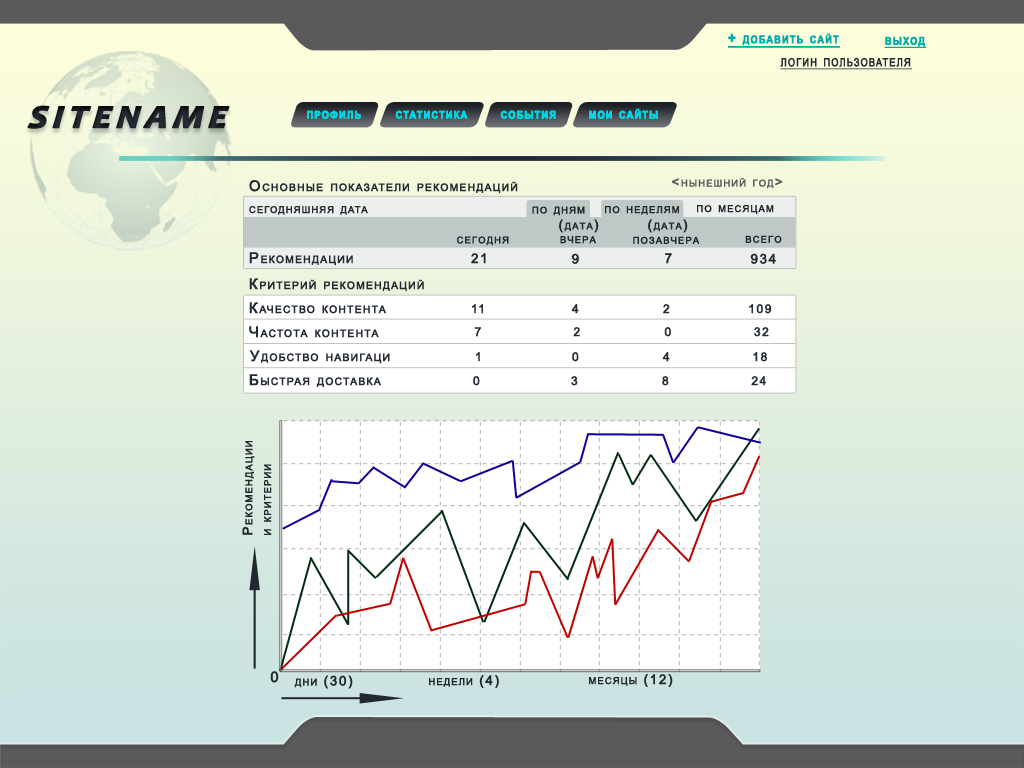
<style>
.page{position:relative;width:1024px;height:768px}
.page>*{position:absolute;margin:0}
.t1{font:15.3px "Arial-BoldMT";letter-spacing:0.1em;color:#00abab;font-variant:small-caps;font-weight:bold;text-decoration:underline;scale:0.86 1}
.t2{font:16.2px "ArialMT";letter-spacing:0.1em;color:#252b33;font-variant:small-caps;font-weight:bold;text-decoration:underline;scale:0.81 1}
.t3{font:40px "Candara-BoldItalic";letter-spacing:0.1em;color:#252b33;font-variant:small-caps;font-weight:bold;font-style:italic}
.t4{font:15.3px "Arial-BoldMT";letter-spacing:0.1em;color:#00d7e3;font-variant:small-caps;font-weight:bold;scale:0.86 1}
.t5{font:14.7px "ArialMT";letter-spacing:0.1em;color:#252b33;font-variant:small-caps;font-weight:bold}
.t6{font:13.3px "ArialMT";letter-spacing:0.1em;color:#5b595c;font-variant:small-caps;font-weight:bold}
.t7{font:13.3px "ArialMT";letter-spacing:0.1em;color:#252b33;font-variant:small-caps;font-weight:bold}
.t8{font:13.3px "ArialMT";letter-spacing:0.1em;color:#22282f;font-variant:small-caps;font-weight:bold}
.t9{font:12px "ArialMT";letter-spacing:0.1em;color:#252b33;font-variant:small-caps;font-weight:bold}
.t10{font:13.3px/18.7px "ArialMT";letter-spacing:0.1em;color:#22282f;font-variant:small-caps;font-weight:bold}
.t11{font:14.7px "ArialMT";letter-spacing:0.1em;color:#252a32;font-variant:small-caps;font-weight:bold}
</style>
<div class="page">
<p class="t1" style="left:728px;top:33px;width:112px;height:15px">+ добавить сайт</p>
<p class="t1" style="left:884px;top:36px;width:43px;height:12px">выход</p>
<p class="t2" style="left:780px;top:57px;width:132px;height:13px">логин пользователя</p>
<p class="t3" style="left:27px;top:105px;width:203px;height:24px">sitename</p>
<p class="t4" style="left:307px;top:110px;width:54px;height:9px">профиль</p>
<p class="t4" style="left:307px;top:110px;width:54px;height:9px">профиль</p>
<p class="t4" style="left:395px;top:110px;width:73px;height:9px">статистика</p>
<p class="t4" style="left:395px;top:110px;width:73px;height:9px">статистика</p>
<p class="t4" style="left:500px;top:110px;width:56px;height:9px">события</p>
<p class="t4" style="left:500px;top:110px;width:56px;height:9px">события</p>
<p class="t4" style="left:589px;top:108px;width:69px;height:11px">мои сайты</p>
<p class="t4" style="left:589px;top:108px;width:69px;height:11px">мои сайты</p>
<p class="t5" style="left:249px;top:180px;width:269px;height:14px">Основные показатели рекомендаций</p>
<p class="t6" style="left:672px;top:178px;width:110px;height:11px">&lt;нынешний год&gt;</p>
<p class="t7" style="left:249px;top:206px;width:119px;height:9px">сегодняшняя дата</p>
<p class="t8" style="left:532px;top:206px;width:53px;height:10px">по дням</p>
<p class="t8" style="left:605px;top:206px;width:74px;height:9px">по неделям</p>
<p class="t8" style="left:697px;top:205px;width:77px;height:9px">по месяцам</p>
<p class="t8" style="left:559px;top:219px;width:40px;height:14px">(дата)</p>
<p class="t8" style="left:648px;top:219px;width:40px;height:14px">(дата)</p>
<p class="t8" style="left:457px;top:236px;width:52px;height:10px">сегодня</p>
<p class="t8" style="left:560px;top:236px;width:36px;height:8px">вчера</p>
<p class="t8" style="left:633px;top:236px;width:67px;height:8px">позавчера</p>
<p class="t8" style="left:745px;top:235px;width:37px;height:8px">всего</p>
<p class="t5" style="left:249px;top:252px;width:104px;height:14px">Рекомендации</p>
<p class="t8" style="left:471px;top:253px;width:15px;height:11px">21</p>
<p class="t8" style="left:571px;top:253px;width:8px;height:11px">9</p>
<p class="t8" style="left:665px;top:253px;width:7px;height:11px">7</p>
<p class="t8" style="left:750px;top:253px;width:26px;height:11px">934</p>
<p class="t5" style="left:249px;top:278px;width:175px;height:14px">Критерий рекомендаций</p>
<p class="t5" style="left:249px;top:302px;width:137px;height:12px">Качество контента</p>
<p class="t9" style="left:472px;top:304px;width:11px;height:10px">11</p>
<p class="t9" style="left:571px;top:304px;width:8px;height:10px">4</p>
<p class="t9" style="left:663px;top:304px;width:7px;height:10px">2</p>
<p class="t9" style="left:749px;top:304px;width:23px;height:10px">109</p>
<p class="t5" style="left:249px;top:326px;width:130px;height:12px">Частота контента</p>
<p class="t9" style="left:474px;top:327px;width:7px;height:10px">7</p>
<p class="t9" style="left:573px;top:327px;width:7px;height:10px">2</p>
<p class="t9" style="left:664px;top:327px;width:7px;height:10px">0</p>
<p class="t9" style="left:754px;top:327px;width:15px;height:10px">32</p>
<p class="t5" style="left:249px;top:350px;width:141px;height:14px">Удобство навигаци</p>
<p class="t9" style="left:476px;top:352px;width:4px;height:10px">1</p>
<p class="t9" style="left:572px;top:352px;width:7px;height:10px">0</p>
<p class="t9" style="left:662px;top:352px;width:8px;height:10px">4</p>
<p class="t9" style="left:753px;top:352px;width:14px;height:10px">18</p>
<p class="t5" style="left:249px;top:374px;width:132px;height:13px">Быстрая доставка</p>
<p class="t9" style="left:473px;top:376px;width:7px;height:10px">0</p>
<p class="t9" style="left:571px;top:376px;width:7px;height:10px">3</p>
<p class="t9" style="left:662px;top:376px;width:7px;height:10px">8</p>
<p class="t9" style="left:751px;top:376px;width:15px;height:10px">24</p>
<p class="t10" style="left:242px;top:441px;width:30px;height:94px;rotate:-90deg">Рекомендации<br>и критерии</p>
<p class="t11" style="left:270px;top:671px;width:9px;height:12px">0</p>
<p class="t8" style="left:294px;top:675px;width:59px;height:14px">дни (30)</p>
<p class="t8" style="left:429px;top:675px;width:70px;height:13px">недели (4)</p>
<p class="t8" style="left:589px;top:674px;width:84px;height:13px">месяцы (12)</p>
</div>
